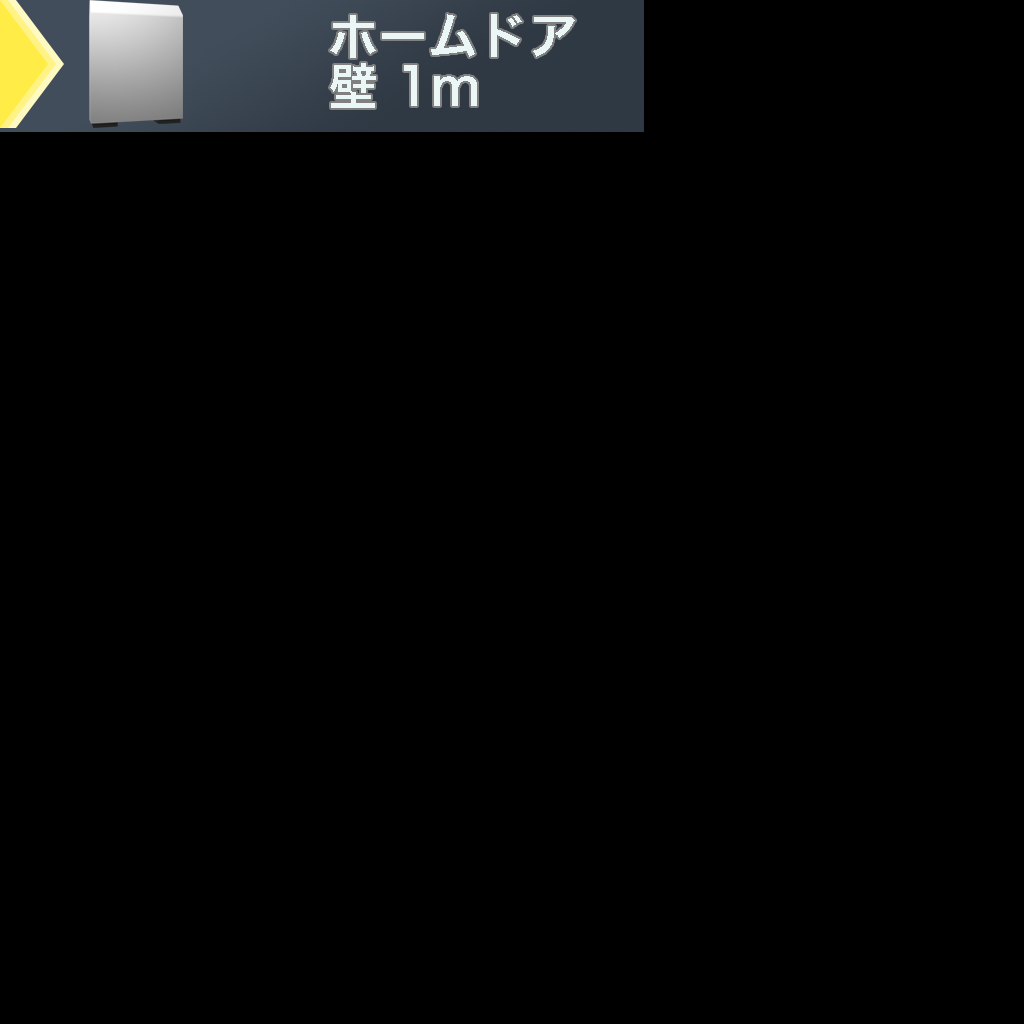
<style>
.page{position:relative;width:1024px;height:1024px;background:#000000}
.page>*{position:absolute;margin:0}
.t1{font:50px/50px "HiraKakuProN-W6";color:#ebf6f7}
</style>
<div class="page">
<p class="t1" style="left:330px;top:14px;width:245px;height:94px">ホームドア<br>壁 1m</p>
</div>
